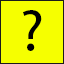
<style>
.page{position:relative;width:64px;height:64px;background:#f6ff00}
.page>*{position:absolute;margin:0}
.t1{font:60px "MyriadPro-Regular";color:#000000}
</style>
<div class="page">
<p class="t1" style="left:23px;top:10px;width:19px;height:41px">?</p>
</div>
